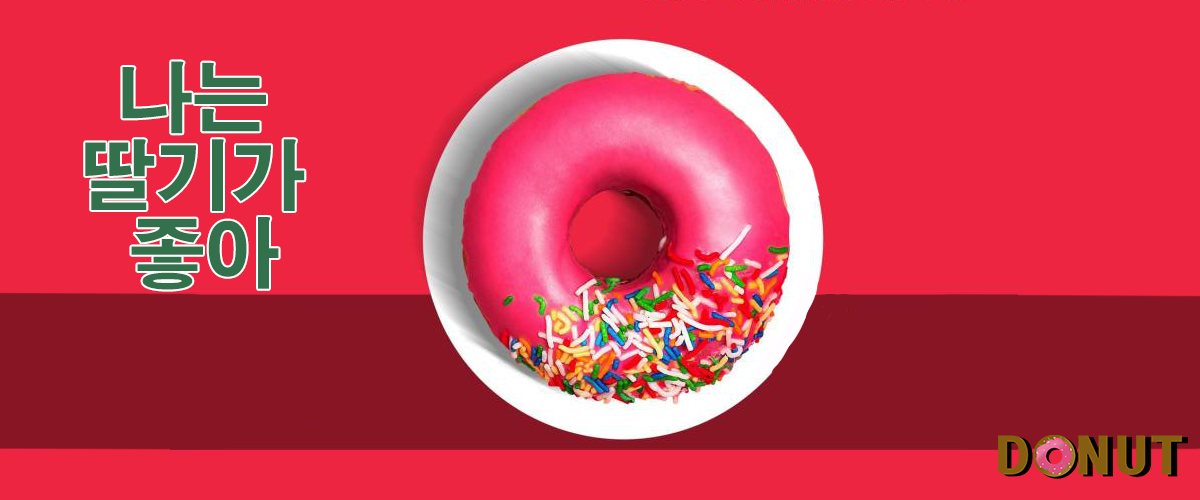
<style>
.page{position:relative;width:1200px;height:500px;background:#ed2541}
.page>*{position:absolute;margin:0}
.t1{font:76.5px/77.8px "H2gtrE";letter-spacing:-0.02em;color:#33714d}
.t2{font:76.5px/117.4px "H2gtrE";letter-spacing:-0.02em;color:#33714d}
</style>
<div class="page">
<p class="t1" style="left:85px;top:61px;width:220px;height:229px;text-align:center"><span class="t2"><br></span>나는 <br>딸기가 <br>좋아</p>
</div>
